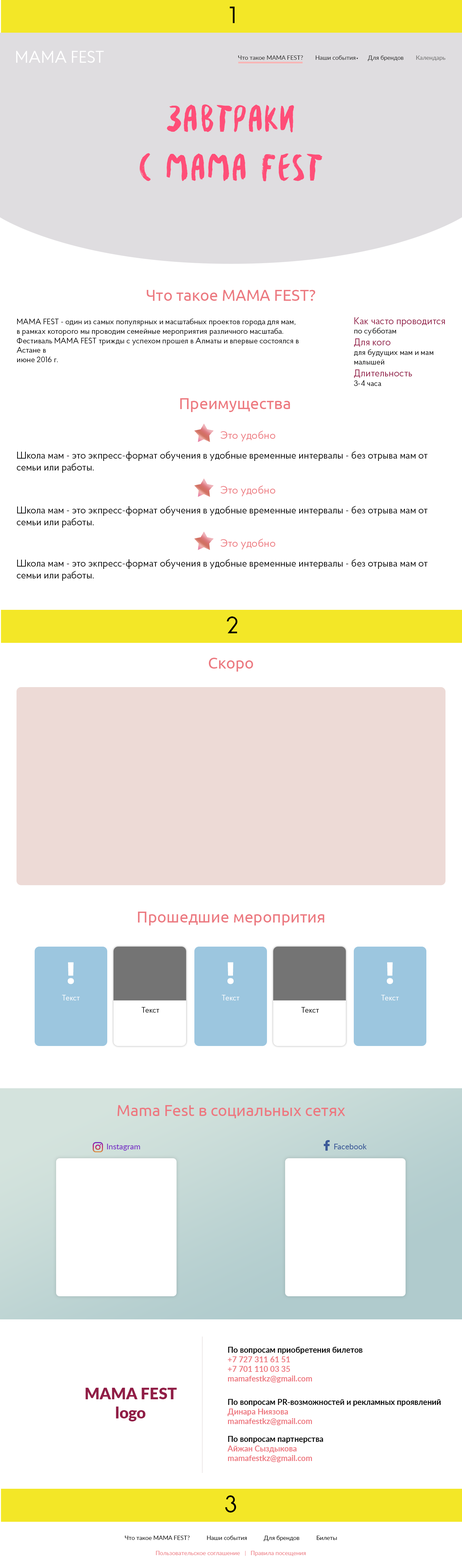
<style>
.page{position:relative;width:462px;height:1568px;background:#ffffff}
.page>*{position:absolute;margin:0}
.t1{font:23.1px "RondaLight";color:#010101}
.t2{font:16.7px "ProbaPro-Regular";color:#ffffff;text-transform:uppercase}
.t3{font:5.9px "Lato-Regular";color:#2b2b2b}
.t4{font:5.9px "Lato-Regular";color:#6d6d6d}
.t5{font:40.7px "Besom";color:#ff4e78}
.t6{font:15.8px "Ubuntu";color:#ec7a81}
.t7{font:7.9px "ProbaPro-Regular";color:#000000}
.t8{font:9.9px "ProbaPro-Regular";color:#911e47}
.t9{font:15.8px "Ubuntu";color:#ed7a80}
.t10{font:10.9px "ProbaPro-Regular";color:#ed7a80}
.t11{font:9.9px "ProbaPro-Regular";color:#000000}
.t12{font:30.3px "MullerExtraBoldDEMO";color:#ffffff}
.t13{font:7.9px "ProbaPro-Regular";color:#ffffff}
.t14{font:15.8px "Ubuntu";color:#ed7880}
.t15{font:7.9px "Lato-Regular";color:#782fc5}
.t16{font:7.9px "Lato-Regular";color:#3b5998}
.t17{font:7.9px "Lato-Bold";color:#ed7880}
.t18{font:7.9px "Lato-Bold";color:#000000}
.t19{font:15.8px "Lato-Black";color:#911e47}
.t20{font:5.9px "Lato-Regular";color:#010101}
.t21{font:5.9px "Lato-Regular";color:#ed7880}
</style>
<div class="page">
<p class="t1" style="left:230px;top:7px;width:5px;height:16px">1</p>
<p class="t2" style="left:16px;top:51px;width:88px;height:12px">Mama Fest</p>
<p class="t3" style="left:238px;top:55px;width:208px;height:6px">Что такое MAMA FEST?        Наши события        Для брендов        <span class="t4">Календарь</span></p>
<p class="t5" style="left:140px;top:104px;width:183px;height:77px;text-align:center">Завтраки<br>с MAMA FEST</p>
<p class="t6" style="left:147px;top:290px;width:169px;height:11px">Что такое MAMA FEST?</p>
<p class="t7" style="left:354px;top:317px;width:91px;height:69px"><span class="t8">Как часто проводится<br></span>по субботам<br><span class="t8">Для кого<br></span>для будущих мам и мам<br>малышей<br><span class="t8">Длительность<br></span>3-4 часа</p>
<p class="t7" style="left:17px;top:318px;width:282px;height:44px">MAMA FEST - один из самых популярных и масштабных проектов города для мам, <br>в рамках которого мы проводим семейные мероприятия различного масштаба.<br>Фестиваль MAMA FEST трижды с успехом прошел в Алматы и впервые состоялся в Астане в<br>июне 2016 г.</p>
<p class="t9" style="left:180px;top:398px;width:110px;height:14px">Преимущества</p>
<p class="t10" style="left:221px;top:431px;width:54px;height:10px">Это удобно</p>
<p class="t11" style="left:17px;top:451px;width:411px;height:22px">Школа мам - это экпресс-формат обучения в удобные временные интервалы - без отрыва мам от семьи или работы.</p>
<p class="t10" style="left:221px;top:485px;width:54px;height:11px">Это удобно</p>
<p class="t11" style="left:17px;top:506px;width:411px;height:22px">Школа мам - это экпресс-формат обучения в удобные временные интервалы - без отрыва мам от семьи или работы.</p>
<p class="t10" style="left:221px;top:539px;width:54px;height:10px">Это удобно</p>
<p class="t11" style="left:17px;top:559px;width:411px;height:22px">Школа мам - это экпресс-формат обучения в удобные временные интервалы - без отрыва мам от семьи или работы.</p>
<p class="t1" style="left:227px;top:616px;width:11px;height:17px">2</p>
<p class="t6" style="left:209px;top:658px;width:44px;height:14px">Скоро</p>
<p class="t6" style="left:138px;top:912px;width:187px;height:13px">Прошедшие меропрития</p>
<p class="t12" style="left:68px;top:962px;width:6px;height:22px">!</p>
<p class="t12" style="left:227px;top:962px;width:7px;height:22px">!</p>
<p class="t12" style="left:387px;top:962px;width:6px;height:22px">!</p>
<p class="t13" style="left:62px;top:995px;width:18px;height:5px">Текст</p>
<p class="t13" style="left:222px;top:995px;width:18px;height:5px">Текст</p>
<p class="t13" style="left:381px;top:995px;width:18px;height:5px">Текст</p>
<p class="t7" style="left:142px;top:1007px;width:17px;height:6px">Текст</p>
<p class="t7" style="left:301px;top:1007px;width:18px;height:6px">Текст</p>
<p class="t14" style="left:118px;top:1105px;width:227px;height:13px">Mama Fest в социальных сетях</p>
<p class="t15" style="left:107px;top:1144px;width:33px;height:7px">Instagram</p>
<p class="t16" style="left:334px;top:1144px;width:33px;height:5px">Facebook</p>
<p class="t17" style="left:228px;top:1347px;width:135px;height:36px"><span class="t18">По вопросам приобретения билетов<br></span>+7 727 311 61 51<br>+7 701 110 03 35<br>mamafestkz@gmail.com</p>
<p class="t19" style="left:86px;top:1388px;width:91px;height:33px;text-align:center">MAMA FEST<br>logo</p>
<p class="t18" style="left:227px;top:1399px;width:214px;height:26px">По вопросам PR-возможностей и рекламных проявлений <br><span class="t17">Динара Ниязова<br>mamafestkz@gmail.com</span></p>
<p class="t17" style="left:227px;top:1436px;width:96px;height:26px"><span class="t18">По вопросам партнерства<br></span>Айжан Сыздыкова<br>mamafestkz@gmail.com</p>
<p class="t1" style="left:225px;top:1495px;width:11px;height:18px">3</p>
<p class="t20" style="left:125px;top:1536px;width:212px;height:5px">Что такое MAMA FEST?           Наши события           Для брендов           Билеты</p>
<p class="t21" style="left:156px;top:1551px;width:150px;height:5px">Пользовательское соглашение Правила посещения</p>
</div>
